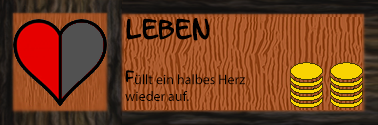
<style>
.page{position:relative;width:378px;height:125px}
.page>*{position:absolute;margin:0}
.t1{font:24px "LetterOMatic";color:#000000}
.t2{font:14px "MyriadPro-Regular";color:#000000}
.t3{font:14px "LetterOMatic";color:#000000}
</style>
<div class="page">
<p class="t1" style="left:126px;top:18px;width:84px;height:23px">Leben</p>
<p class="t2" style="left:125px;top:70px;width:120px;height:31px"><span class="t3">F</span>üllt ein halbes Herz wieder auf.</p>
</div>
